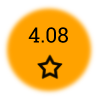
<style>
.page{position:relative;width:100px;height:100px;background:#ffa200}
.page>*{position:absolute;margin:0}
.t1{font:36px "RobotoSlab-Regular";color:#000000}
</style>
<div class="page">
<p class="t1" style="left:28px;top:27px;width:40px;height:16px">4.08</p>
</div>
